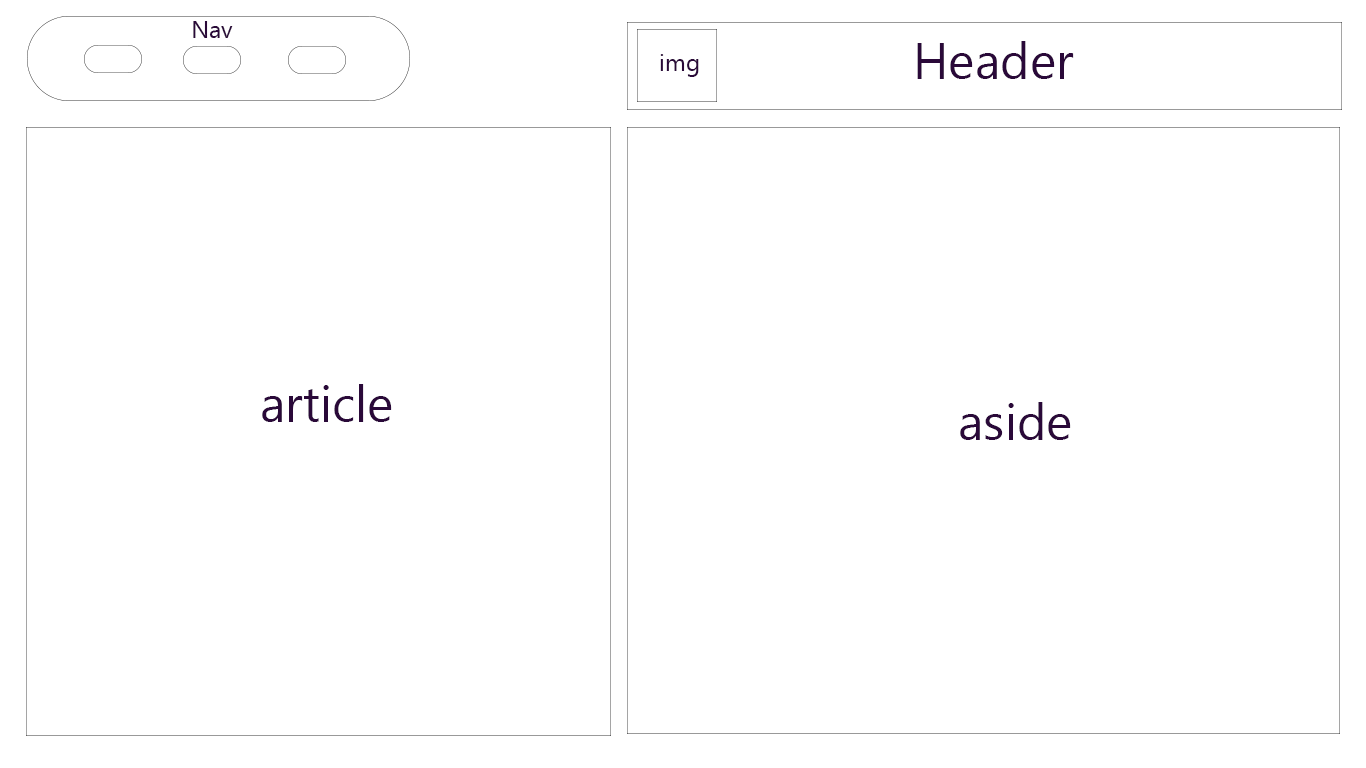
<style>
.page{position:relative;width:1366px;height:768px;background:#ffffff}
.page>*{position:absolute;margin:0}
.t1{font:23.7px "MicrosoftTaiLe";color:#2a0939}
.t2{font:50px "MicrosoftTaiLe";color:#2a0939}
.t3{font:24.4px "MicrosoftTaiLe";color:#2a0939}
</style>
<div class="page">
<p class="t1" style="left:193px;top:21px;width:40px;height:17px">Nav</p>
<p class="t2" style="left:917px;top:41px;width:157px;height:38px">Header</p>
<p class="t3" style="left:660px;top:54px;width:39px;height:23px">img</p>
<p class="t2" style="left:262px;top:384px;width:130px;height:38px">article</p>
<p class="t2" style="left:960px;top:402px;width:111px;height:38px">aside</p>
</div>
